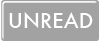
<style>
.page{position:relative;width:100px;height:41px;background:#a2a2a2}
.page>*{position:absolute;margin:0}
.t1{font:20.4px "Futura-Medium";color:#ffffff;text-transform:uppercase}
</style>
<div class="page">
<p class="t1" style="left:9px;top:12px;width:84px;height:16px">unread</p>
</div>
